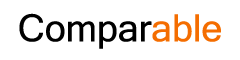
<style>
.page{position:relative;width:240px;height:60px;background:#ffffff}
.page>*{position:absolute;margin:0}
.t1{font:37.5px "MicrosoftSansSerif";color:#000000}
.t2{font:37.5px "MicrosoftSansSerif";color:#f46d00}
</style>
<div class="page">
<p class="t1" style="left:19px;top:13px;width:202px;height:36px">Compar<span class="t2">able</span></p>
</div>
